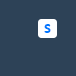
<style>
.page{position:relative;width:76px;height:76px;background:#2d4257}
.page>*{position:absolute;margin:0}
.t1{font:12px "Dosis-ExtraBold";color:#0078ff;text-transform:uppercase}
</style>
<div class="page">
<p class="t1" style="left:44px;top:24px;width:7px;height:9px">s</p>
</div>
